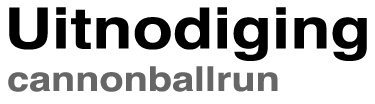
<style>
.page{position:relative;width:375px;height:104px;background:#ffffff}
.page>*{position:absolute;margin:0}
.t1{font:57px "Helvetica-Bold";color:#000000;scale:1.16 1}
.t2{font:34.2px "Helvetica-Bold";color:#666666;scale:1.16 1}
</style>
<div class="page">
<p class="t1" style="left:9px;top:7px;width:358px;height:54px">Uitnodiging</p>
<p class="t2" style="left:8px;top:66px;width:270px;height:26px">cannonballrun</p>
</div>
